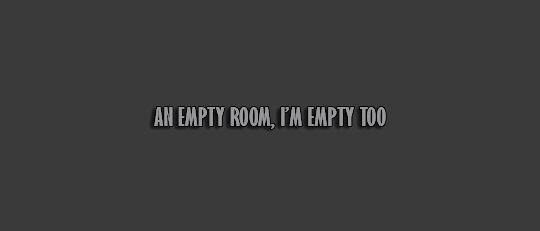
<style>
.page{position:relative;width:540px;height:231px;background:#3a3a3a}
.page>*{position:absolute;margin:0}
.t1{font:24px "GillSansMT-ExtraCondensedBold";color:#979797;scale:1.25 1}
</style>
<div class="page">
<p class="t1" style="left:154px;top:107px;width:232px;height:23px">AN EMPTY ROOM, I’M EMPTY TOO</p>
</div>
